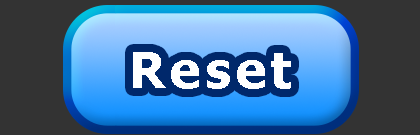
<style>
.page{position:relative;width:420px;height:135px;background:#333333}
.page>*{position:absolute;margin:0}
.t1{font:50px "Tahoma-Bold";letter-spacing:0.1em;color:#ffffff}
</style>
<div class="page">
<p class="t1" style="left:133px;top:52px;width:158px;height:37px">Reset</p>
</div>
